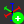
<style>
.page{position:relative;width:24px;height:24px;background:#333333}
.page>*{position:absolute;margin:0}
.t1{font:11.6px "AmericanTypewriter-CondensedBold";color:#ffffff}
</style>
<div class="page">
<p class="t1" style="left:15px;top:16px;width:6px;height:5px">+</p>
</div>
